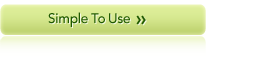
<style>
.page{position:relative;width:272px;height:57px;background:#ffffff}
.page>*{position:absolute;margin:0}
.t1{font:13.7px "Avenir-Medium";letter-spacing:-0.04em;color:#205a00}
.t2{font:20.1px "Avenir-Heavy";color:#205a00}
</style>
<div class="page">
<p class="t1" style="left:48px;top:12px;width:82px;height:15px">Simple To Use</p>
<p class="t2" style="left:136px;top:15px;width:5px;height:10px">›</p>
<p class="t2" style="left:141px;top:15px;width:5px;height:10px">›</p>
</div>
